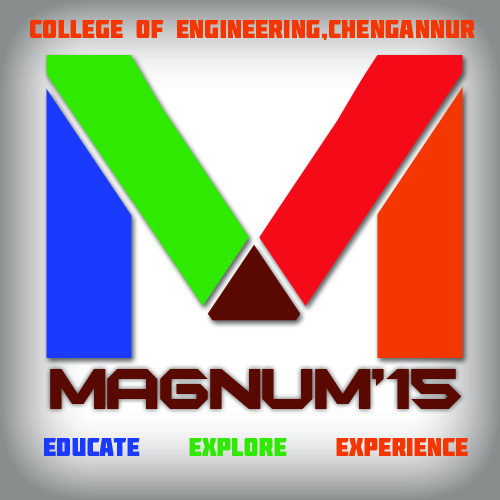
<style>
.page{position:relative;width:500px;height:500px}
.page>*{position:absolute;margin:0}
.t1{font:25px "Molot";color:#f43700}
.t2{font:50px "DKCForever";color:#5a0900}
.t3{font:25px "Molot";color:#1a3aff}
.t4{font:25px "Molot";color:#30e900}
</style>
<div class="page">
<p class="t1" style="left:30px;top:20px;width:445px;height:20px">college of engineering,chengannur</p>
<p class="t2" style="left:50px;top:369px;width:412px;height:40px">magnum’15</p>
<p class="t1" style="left:44px;top:438px;width:424px;height:18px"><span class="t3">educate    </span><span class="t4">explore    </span>experience</p>
</div>
